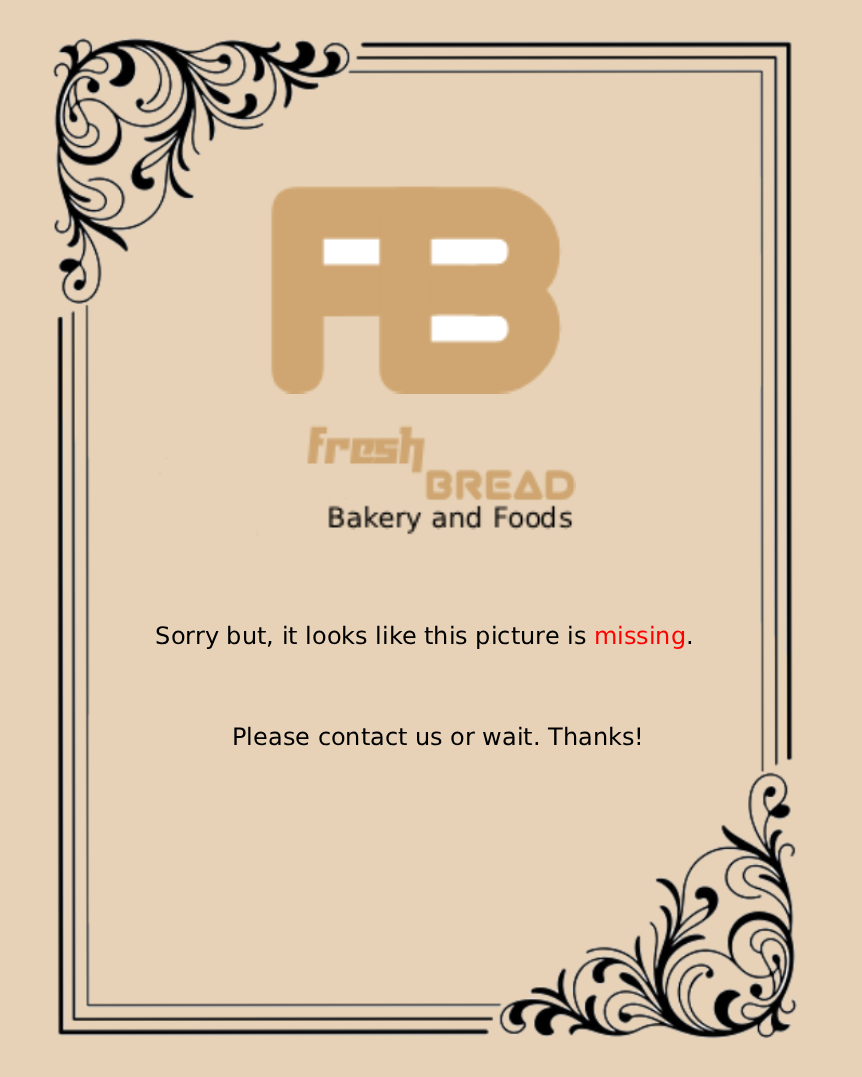
<style>
.page{position:relative;width:862px;height:1077px;background:#e7d2b7}
.page>*{position:absolute;margin:0}
.t1{font:24px "DejaVuSans";color:#000000}
.t2{font:24px "DejaVuSans";color:#ff0000}
</style>
<div class="page">
<p class="t1" style="left:156px;top:625px;width:536px;height:24px">Sorry but, it looks like this picture is <span class="t2">missing</span>.</p>
<p class="t1" style="left:234px;top:726px;width:406px;height:20px">Please contact us or wait. Thanks!</p>
</div>
